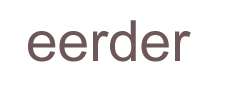
<style>
.page{position:relative;width:232px;height:93px;background:#ffffff}
.page>*{position:absolute;margin:0}
.t1{font:56.7px "ArialMT";color:#6d5758}
</style>
<div class="page">
<p class="t1" style="left:28px;top:20px;width:163px;height:42px">eerder</p>
</div>
